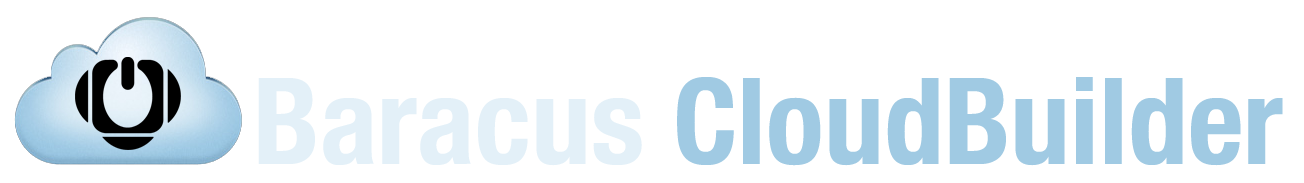
<style>
.page{position:relative;width:1304px;height:183px;background:#ffffff}
.page>*{position:absolute;margin:0}
.t1{font:120px "HelveticaNeue-CondensedBold";color:#a0cae3}
.t2{font:120px "HelveticaNeue-CondensedBold";color:#e3f0f8}
</style>
<div class="page">
<p class="t1" style="left:258px;top:77px;width:1025px;height:89px"><span class="t2">Baracus</span> CloudBuilder</p>
</div>
